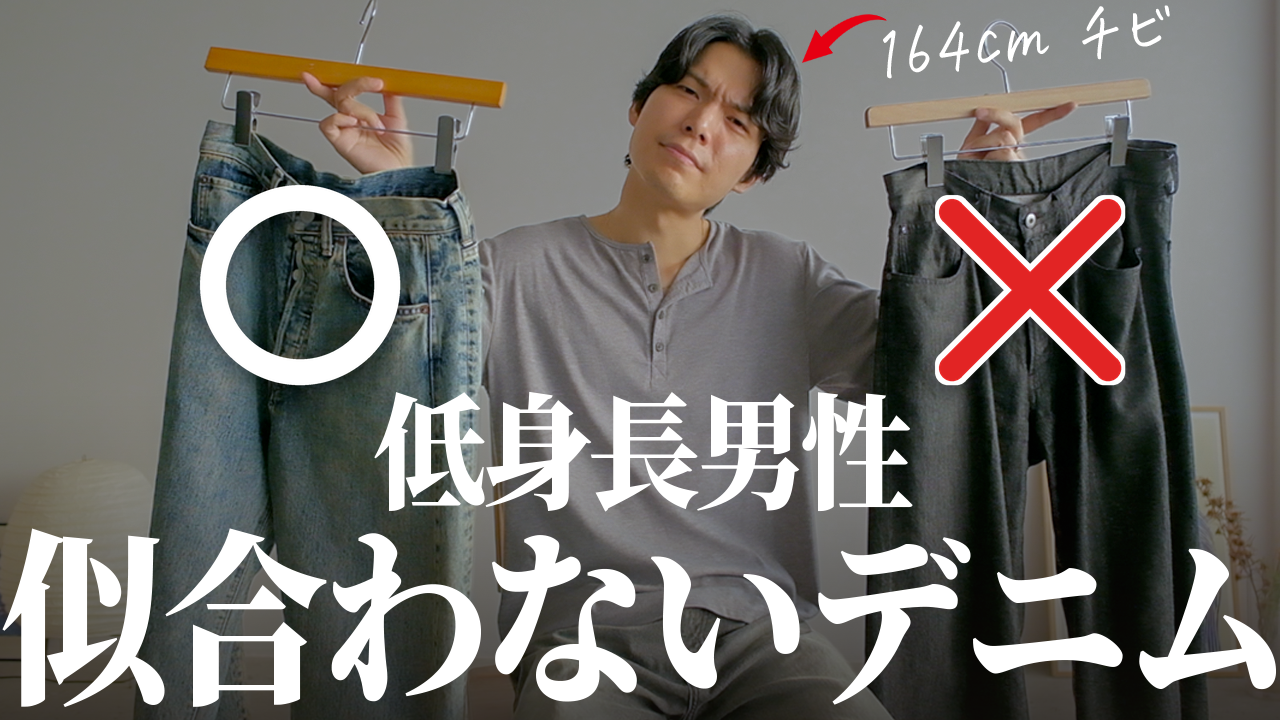
<style>
.page{position:relative;width:1280px;height:720px}
.page>*{position:absolute;margin:0}
.t1{font:66.7px "hanatotyoutyo";color:#ffffff;scale:0.9 1}
.t2{font:125px "SourceHanSerifJP-Heavy";letter-spacing:-0.05em;color:#ffffff;scale:0.9 1}
.t3{font:187.5px "SourceHanSerifJP-Heavy";letter-spacing:-0.05em;color:#ffffff;scale:0.9 1}
</style>
<div class="page">
<p class="t1" style="left:883px;top:5px;width:287px;height:74px;rotate:-5deg">164cm チビ</p>
<p class="t2" style="left:374px;top:391px;width:539px;height:121px">低身長男性</p>
<p class="t3" style="left:2px;top:528px;width:1275px;height:180px">似合わないデニム</p>
</div>
